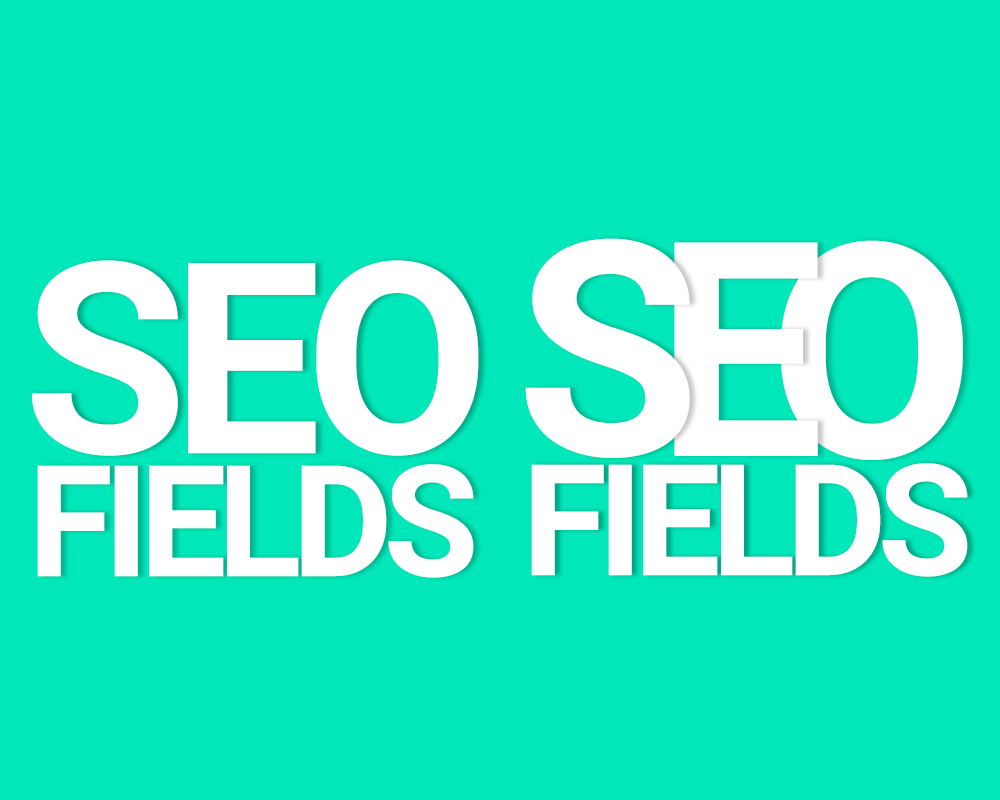
<style>
.page{position:relative;width:1000px;height:800px;background:#00e7b9}
.page>*{position:absolute;margin:0}
.t1{font:300px "Roboto-Bold";color:#ffffff}
.t2{font:267px "Roboto-Bold";letter-spacing:-0.06em;color:#ffffff}
.t3{font:155px "Roboto-Bold";letter-spacing:-0.06em;color:#ffffff}
</style>
<div class="page">
<p class="t1" style="left:525px;top:238px;width:165px;height:220px">S</p>
<p class="t1" style="left:674px;top:242px;width:144px;height:214px">E</p>
<p class="t1" style="left:781px;top:240px;width:182px;height:220px">O</p>
<p class="t2" style="left:32px;top:260px;width:447px;height:196px">SEO</p>
<p class="t3" style="left:37px;top:464px;width:437px;height:114px">FIELDS</p>
<p class="t3" style="left:531px;top:463px;width:437px;height:114px">FIELDS</p>
</div>
